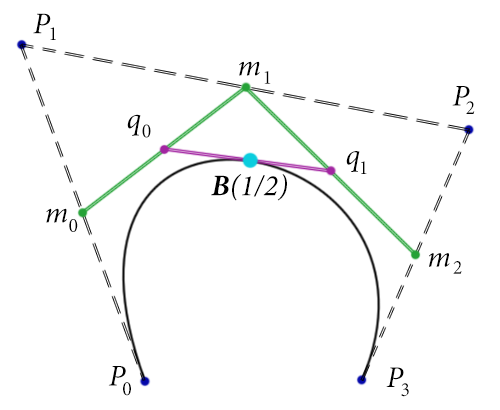
<style>
.page{position:relative;width:500px;height:410px;background:#ffffff}
.page>*{position:absolute;margin:0}
.t1{font:30px "MinionPro-It";color:#000000}
.t2{font:20px "MinionPro-Regular";color:#000000}
.t3{font:30px "MinionPro-BoldIt";color:#000000}
</style>
<div class="page">
<p class="t1" style="left:33px;top:13px;width:18px;height:21px">P</p>
<p class="t2" style="left:50px;top:27px;width:6px;height:13px">1</p>
<p class="t1" style="left:239px;top:61px;width:21px;height:15px">m</p>
<p class="t2" style="left:264px;top:71px;width:7px;height:13px">1</p>
<p class="t1" style="left:452px;top:86px;width:18px;height:20px">P</p>
<p class="t2" style="left:466px;top:101px;width:9px;height:13px">2</p>
<p class="t1" style="left:127px;top:114px;width:14px;height:22px">q</p>
<p class="t2" style="left:142px;top:124px;width:9px;height:14px">0</p>
<p class="t1" style="left:346px;top:151px;width:14px;height:21px">q</p>
<p class="t2" style="left:361px;top:161px;width:6px;height:13px">1</p>
<p class="t1" style="left:211px;top:174px;width:76px;height:27px"><span class="t3">B</span>(1/2)</p>
<p class="t1" style="left:46px;top:208px;width:21px;height:15px">m</p>
<p class="t2" style="left:69px;top:219px;width:9px;height:13px">0</p>
<p class="t1" style="left:429px;top:253px;width:21px;height:14px">m</p>
<p class="t2" style="left:453px;top:261px;width:9px;height:13px">2</p>
<p class="t1" style="left:108px;top:366px;width:18px;height:20px">P</p>
<p class="t1" style="left:386px;top:367px;width:18px;height:20px">P</p>
<p class="t2" style="left:123px;top:382px;width:8px;height:14px">0</p>
<p class="t2" style="left:401px;top:383px;width:8px;height:14px">3</p>
</div>
